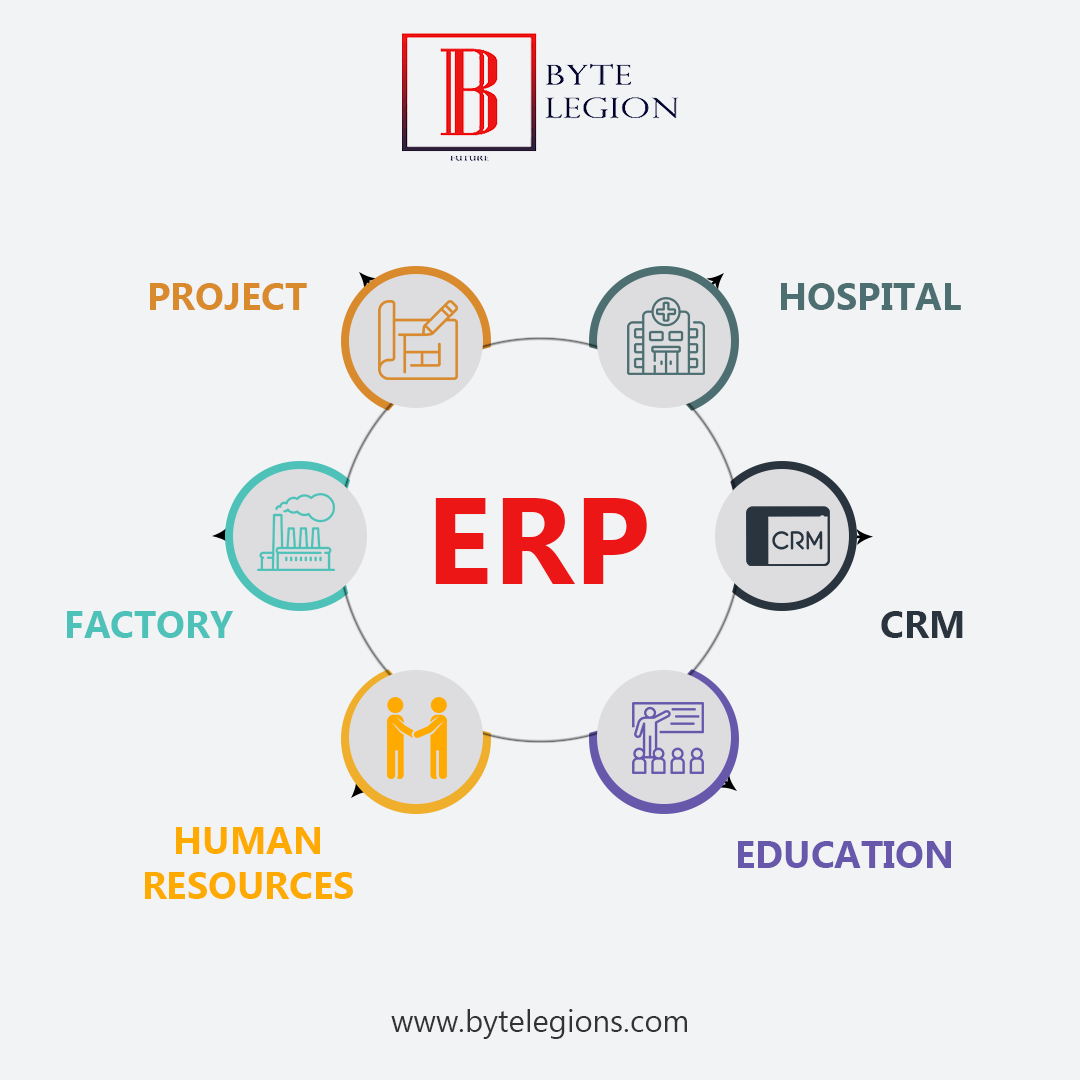
<style>
.page{position:relative;width:1080px;height:1080px;background:#f2f3f5}
.page>*{position:absolute;margin:0}
.t1{font:38px "MyanmarText-Bold";color:#d88a2d;text-transform:uppercase}
.t2{font:38px "MyanmarText-Bold";color:#4d6f71;text-transform:uppercase}
.t3{font:122.6px "MyanmarText-Bold";letter-spacing:0.01em;color:#ed1616}
.t4{font:38px "MyanmarText-Bold";color:#4ec2b8;text-transform:uppercase}
.t5{font:38px "MyanmarText-Bold";color:#29343e}
.t6{font:38px/45px "MyanmarText-Bold";color:#feaa00;text-transform:uppercase}
.t7{font:38px "MyanmarText-Bold";color:#6758ac;text-transform:uppercase}
.t8{font:31px "MyanmarText";color:#323335}
</style>
<div class="page">
<p class="t1" style="left:150px;top:283px;width:157px;height:27px">Project</p>
<p class="t2" style="left:781px;top:283px;width:180px;height:27px">Hospital</p>
<p class="t3" style="left:435px;top:498px;width:212px;height:86px">ERP</p>
<p class="t4" style="left:67px;top:611px;width:166px;height:27px">Factory</p>
<p class="t5" style="left:881px;top:611px;width:82px;height:27px">CRM</p>
<p class="t6" style="left:145px;top:827px;width:208px;height:72px;text-align:center">Human<br>Resources</p>
<p class="t7" style="left:738px;top:841px;width:213px;height:27px">Education</p>
<p class="t8" style="left:391px;top:1009px;width:296px;height:30px">www.bytelegions.com</p>
</div>
